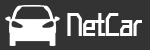
<style>
.page{position:relative;width:150px;height:50px;background:#333333}
.page>*{position:absolute;margin:0}
.t1{font:30px "mechanik-Regular";letter-spacing:-0.075em;color:#ffffff;scale:0.85 1}
</style>
<div class="page">
<p class="t1" style="left:67px;top:13px;width:75px;height:23px">NetCar</p>
</div>
